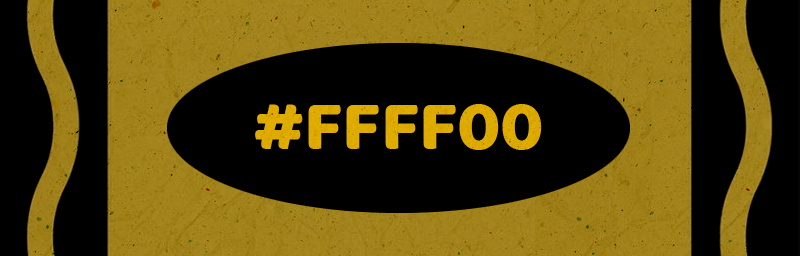
<style>
.page{position:relative;width:800px;height:256px;background:#000000}
.page>*{position:absolute;margin:0}
.t1{font:72px "Baloo2-ExtraBold";color:#e8b500}
</style>
<div class="page">
<p class="t1" style="left:255px;top:104px;width:287px;height:46px">#FFFF00</p>
</div>
